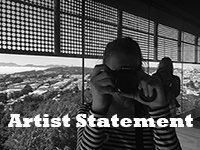
<style>
.page{position:relative;width:200px;height:150px}
.page>*{position:absolute;margin:0}
.t1{font:19.2px "Rockwell-ExtraBold";color:#ffffff}
</style>
<div class="page">
<p class="t1" style="left:8px;top:114px;width:185px;height:13px">Artist Statement</p>
</div>
